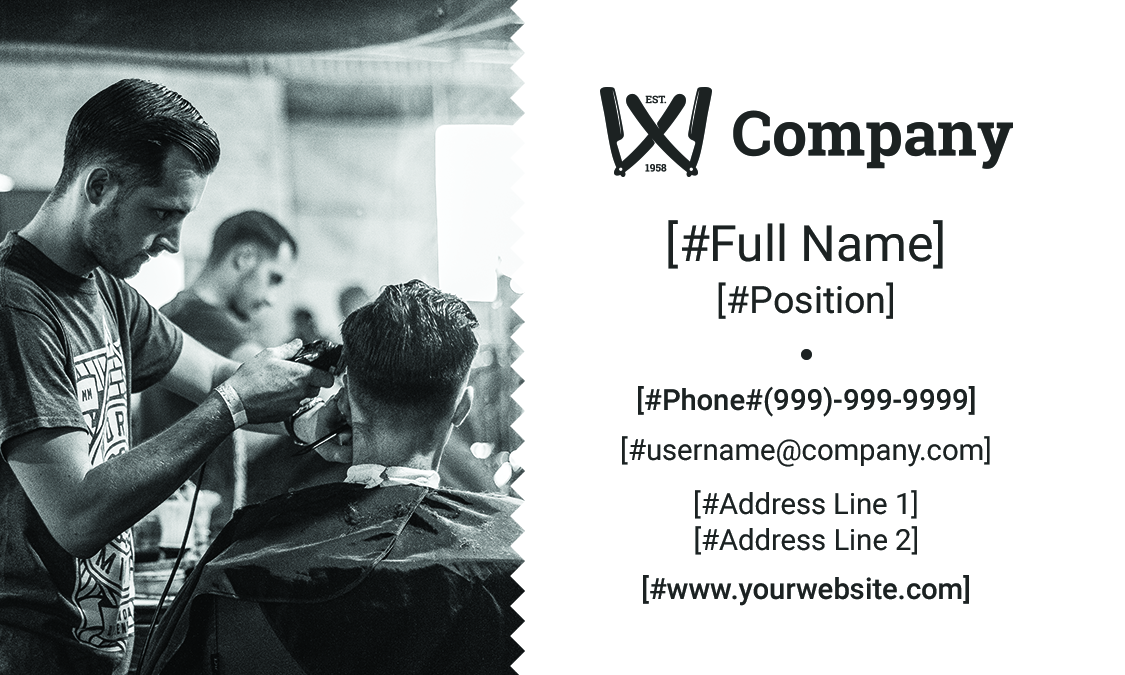
<style>
.page{position:relative;width:1125px;height:675px;background:#ffffff}
.page>*{position:absolute;margin:0}
.t1{font:50px "Roboto-Regular";color:#1c2122}
.t2{font:37.5px "Roboto-Regular";color:#1c2122}
.t3{font:29.2px "Roboto-Medium";color:#1c2122}
.t4{font:29.2px "Roboto-Regular";color:#1c2122}
</style>
<div class="page">
<p class="t1" style="left:668px;top:220px;width:275px;height:49px">[#Full Name]</p>
<p class="t2" style="left:718px;top:282px;width:175px;height:37px">[#Position]</p>
<p class="t3" style="left:638px;top:386px;width:337px;height:31px">[#Phone#(999)-999-9999]</p>
<p class="t4" style="left:622px;top:436px;width:368px;height:31px">[#username@company.com]</p>
<p class="t4" style="left:695px;top:490px;width:222px;height:29px">[#Address Line 1]</p>
<p class="t4" style="left:695px;top:526px;width:222px;height:29px">[#Address Line 2]</p>
<p class="t3" style="left:643px;top:575px;width:326px;height:31px">[#www.yourwebsite.com]</p>
</div>
